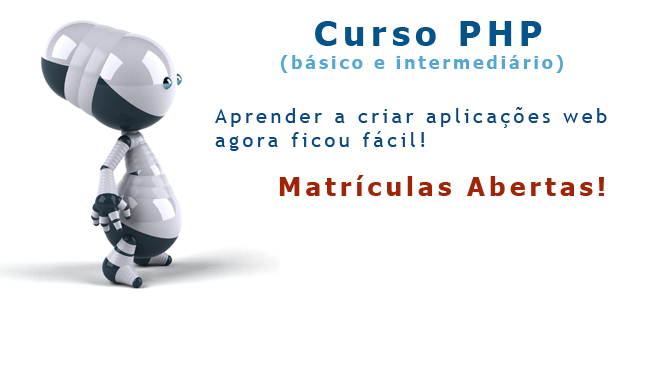
<style>
.page{position:relative;width:661px;height:378px;background:#ffffff}
.page>*{position:absolute;margin:0}
.t1{font:35px "Tahoma-Bold";letter-spacing:0.16em;color:#055389}
.t2{font:18px "Tahoma-Bold";letter-spacing:0.16em;color:#55a7d1}
.t3{font:20px "TrebuchetMS";letter-spacing:0.16em;color:#0a4781}
.t4{font:26px "Tahoma-Bold";letter-spacing:0.16em;color:#a02408}
</style>
<div class="page">
<p class="t1" style="left:315px;top:21px;width:227px;height:25px">Curso PHP</p>
<p class="t2" style="left:281px;top:55px;width:282px;height:18px">(básico e intermediário)</p>
<p class="t3" style="left:215px;top:107px;width:392px;height:44px">Aprender a criar aplicações web<br>agora ficou fácil!</p>
<p class="t4" style="left:279px;top:175px;width:325px;height:21px">Matrículas Abertas!</p>
</div>
